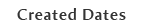
<style>
.page{position:relative;width:144px;height:28px;background:#ffffff}
.page>*{position:absolute;margin:0}
.t1{font:16px "AmiraParadiso";letter-spacing:0.05em;color:#333333}
</style>
<div class="page">
<p class="t1" style="left:17px;top:8px;width:109px;height:12px">Created Dates</p>
</div>
